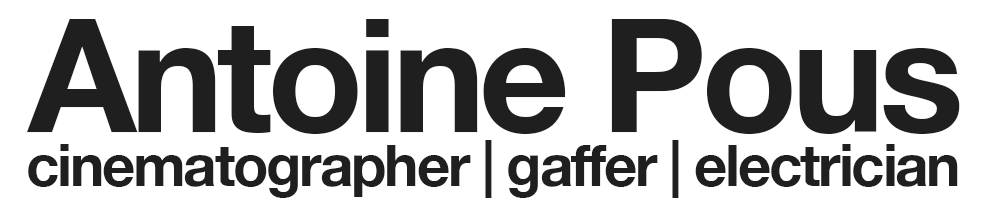
<style>
.page{position:relative;width:1000px;height:216px;background:#ffffff}
.page>*{position:absolute;margin:0}
.t1{font:158.3px "HelveticaNeue-Bold";letter-spacing:-0.04em;color:#201f1f}
.t2{font:58.3px "HelveticaNeue-Bold";letter-spacing:-0.04em;color:#201f1f}
</style>
<div class="page">
<p class="t1" style="left:27px;top:19px;width:933px;height:115px">Antoine Pous</p>
<p class="t2" style="left:28px;top:140px;width:930px;height:58px">cinematographer | gaffer | electrician</p>
</div>
